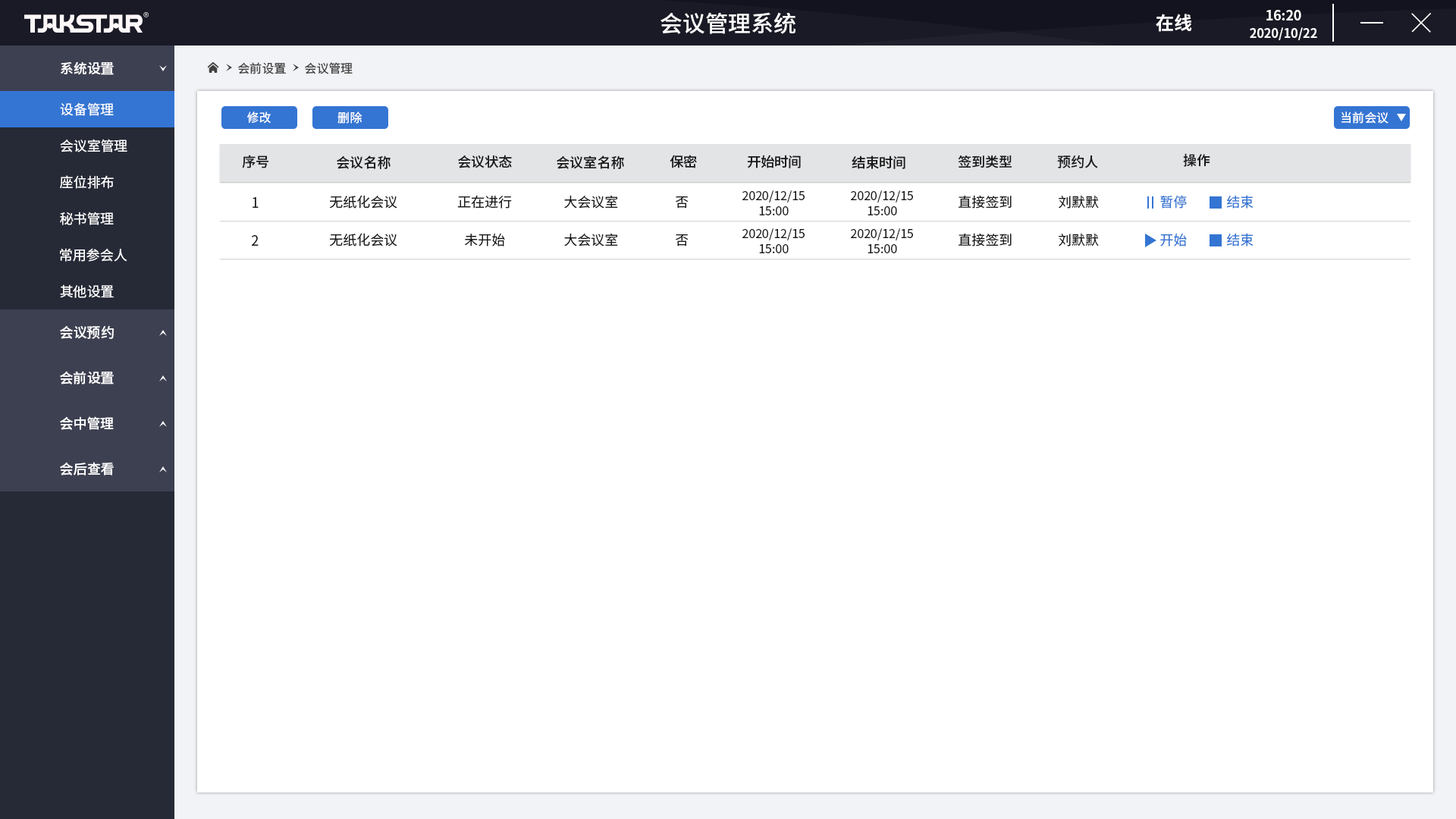
<style>
.page{position:relative;width:1456px;height:819px;background:#ffffff}
.page>*{position:absolute;margin:0}
.t1{font:22.7px "SourceHanSansCN-Medium";color:#ffffff}
.t2{font:18.2px "SourceHanSansCN-Bold";color:#ffffff}
.t3{font:12.6px/17.2px "SourceHanSansCN-Bold";letter-spacing:-0.01em;color:#fefefe}
.t4{font:13.8px/17.2px "SourceHanSansCN-Bold";letter-spacing:-0.01em;color:#fefefe}
.t5{font:13.6px "SourceHanSansCN-Medium";color:#ffffff}
.t6{font:12.1px "SourceHanSansCN-Regular";color:#404040}
.t7{font:13.6px "SourceHanSansCN-Regular";color:#ffffff}
.t8{font:12.1px "SourceHanSansCN-Regular";color:#ffffff}
.t9{font:13.6px "SourceHanSansCN-Medium";color:#1a1a1a}
.t10{font:13.6px "SourceHanSansCN-Regular";color:#1a1a1a}
.t11{font:12.1px "SourceHanSansCN-Regular";color:#1a1a1a}
.t12{font:13.6px "SourceHanSansCN-Regular";color:#3475d3}
</style>
<div class="page">
<p class="t1" style="left:660px;top:12px;width:135px;height:22px">会议管理系统</p>
<p class="t2" style="left:1156px;top:14px;width:36px;height:18px">在线</p>
<p class="t3" style="left:1250px;top:10px;width:67px;height:30px;text-align:center"><span class="t4">16:20<br></span>2020/10/22</p>
<p class="t5" style="left:61px;top:61px;width:53px;height:14px">系统设置</p>
<p class="t6" style="left:238px;top:62px;width:48px;height:12px">会前设置</p>
<p class="t6" style="left:305px;top:62px;width:48px;height:12px">会议管理</p>
<p class="t7" style="left:60px;top:102px;width:54px;height:14px">设备管理</p>
<p class="t8" style="left:247px;top:111px;width:24px;height:13px">修改</p>
<p class="t8" style="left:337px;top:111px;width:25px;height:13px">删除</p>
<p class="t8" style="left:1341px;top:111px;width:47px;height:13px">当前会议</p>
<p class="t7" style="left:60px;top:139px;width:67px;height:13px">会议室管理</p>
<p class="t9" style="left:242px;top:155px;width:27px;height:13px">序号</p>
<p class="t9" style="left:337px;top:155px;width:54px;height:14px">会议名称</p>
<p class="t9" style="left:458px;top:155px;width:54px;height:13px">会议状态</p>
<p class="t9" style="left:557px;top:155px;width:67px;height:14px">会议室名称</p>
<p class="t9" style="left:670px;top:155px;width:27px;height:13px">保密</p>
<p class="t9" style="left:747px;top:155px;width:54px;height:13px">开始时间</p>
<p class="t9" style="left:852px;top:155px;width:53px;height:14px">结束时间</p>
<p class="t9" style="left:958px;top:155px;width:54px;height:13px">签到类型</p>
<p class="t9" style="left:1057px;top:155px;width:41px;height:13px">预约人</p>
<p class="t9" style="left:1183px;top:153px;width:27px;height:14px">操作</p>
<p class="t7" style="left:60px;top:175px;width:54px;height:14px">座位排布</p>
<p class="t10" style="left:253px;top:197px;width:6px;height:11px">1</p>
<p class="t10" style="left:329px;top:195px;width:68px;height:14px">无纸化会议</p>
<p class="t10" style="left:457px;top:195px;width:55px;height:14px">正在进行</p>
<p class="t10" style="left:564px;top:195px;width:54px;height:14px">大会议室</p>
<p class="t10" style="left:676px;top:196px;width:13px;height:13px">否</p>
<p class="t11" style="left:742px;top:190px;width:63px;height:25px;text-align:center">2020/12/15<br>15:00</p>
<p class="t11" style="left:851px;top:190px;width:62px;height:25px;text-align:center">2020/12/15<br>15:00</p>
<p class="t10" style="left:959px;top:195px;width:53px;height:14px">直接签到</p>
<p class="t10" style="left:1059px;top:195px;width:40px;height:14px">刘默默</p>
<p class="t12" style="left:1160px;top:195px;width:27px;height:14px">暂停</p>
<p class="t12" style="left:1227px;top:195px;width:27px;height:14px">结束</p>
<p class="t7" style="left:60px;top:212px;width:54px;height:13px">秘书管理</p>
<p class="t10" style="left:329px;top:233px;width:68px;height:13px">无纸化会议</p>
<p class="t10" style="left:464px;top:233px;width:41px;height:13px">未开始</p>
<p class="t10" style="left:564px;top:233px;width:54px;height:13px">大会议室</p>
<p class="t11" style="left:742px;top:228px;width:63px;height:25px;text-align:center">2020/12/15<br>15:00</p>
<p class="t11" style="left:851px;top:228px;width:62px;height:25px;text-align:center">2020/12/15<br>15:00</p>
<p class="t10" style="left:959px;top:233px;width:53px;height:13px">直接签到</p>
<p class="t10" style="left:1059px;top:233px;width:40px;height:13px">刘默默</p>
<p class="t12" style="left:1160px;top:233px;width:27px;height:13px">开始</p>
<p class="t12" style="left:1227px;top:233px;width:27px;height:13px">结束</p>
<p class="t10" style="left:252px;top:235px;width:7px;height:11px">2</p>
<p class="t10" style="left:676px;top:234px;width:13px;height:12px">否</p>
<p class="t7" style="left:60px;top:248px;width:67px;height:14px">常用参会人</p>
<p class="t7" style="left:60px;top:284px;width:54px;height:14px">其他设置</p>
<p class="t5" style="left:60px;top:325px;width:54px;height:14px">会议预约</p>
<p class="t5" style="left:60px;top:371px;width:54px;height:13px">会前设置</p>
<p class="t5" style="left:60px;top:416px;width:54px;height:14px">会中管理</p>
<p class="t5" style="left:60px;top:462px;width:54px;height:13px">会后查看</p>
</div>
